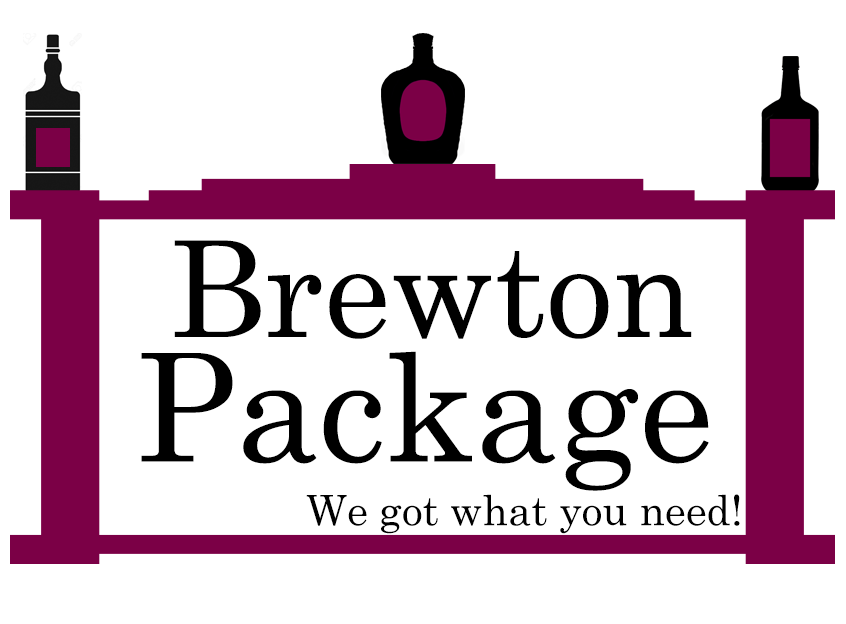
<style>
.page{position:relative;width:846px;height:624px;background:#ffffff}
.page>*{position:absolute;margin:0}
.t1{font:133.3px "Century";color:#000000}
.t2{font:150px "Century";color:#000000}
.t3{font:41.7px "CenturySchoolbook";color:#000000}
</style>
<div class="page">
<p class="t1" style="left:174px;top:240px;width:518px;height:99px">Brewton</p>
<p class="t2" style="left:141px;top:351px;width:568px;height:140px">Package</p>
<p class="t3" style="left:306px;top:494px;width:434px;height:40px">We got what you need!</p>
</div>
